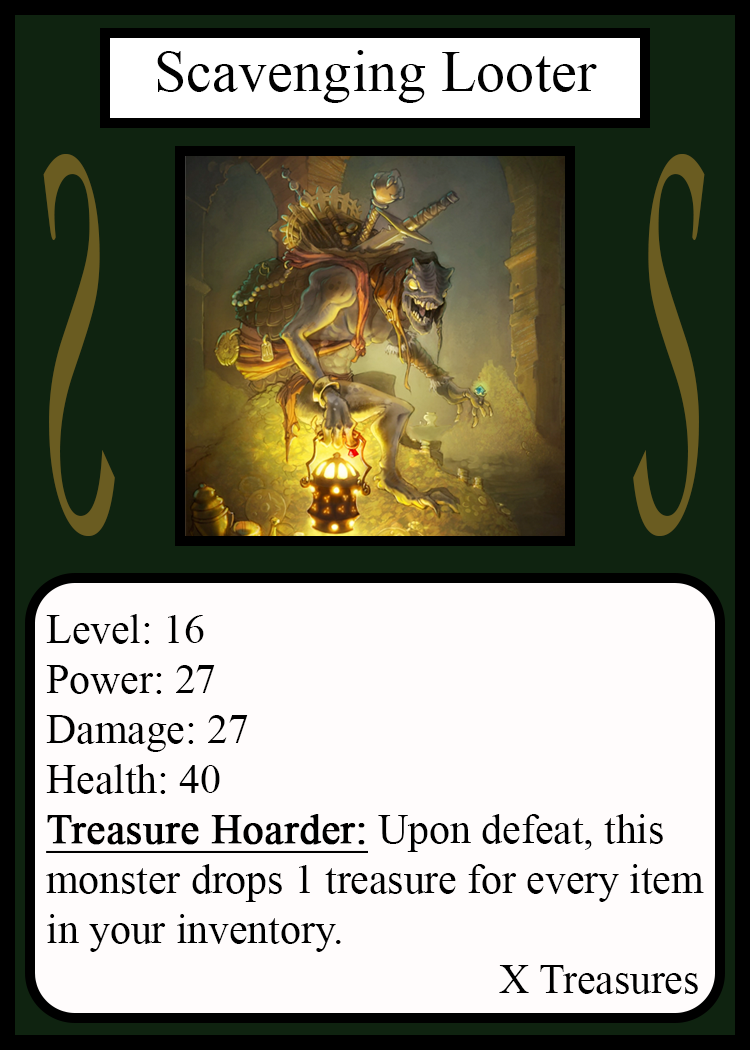
<style>
.page{position:relative;width:750px;height:1050px;background:#fffcfc}
.page>*{position:absolute;margin:0}
.t1{font:58.3px "TimesNewRomanPSMT";color:#010101}
.t2{font:548.5px "Apple-Chancery";color:#6a5c21;scale:0.27 1}
.t3{font:548.2px "Apple-Chancery";color:#6a5c21;scale:0.27 1}
.t4{font:41.7px "TimesNewRomanPSMT";color:#000000}
.t5{font:41.7px "TimesNewRomanPSMT";color:#000000;font-weight:bold;text-decoration:underline}
</style>
<div class="page">
<p class="t1" style="left:157px;top:50px;width:440px;height:53px">Scavenging Looter</p>
<p class="t2" style="left:43px;top:154px;width:72px;height:382px;rotate:180deg">S</p>
<p class="t3" style="left:633px;top:154px;width:72px;height:382px">S</p>
<p class="t4" style="left:46px;top:614px;width:658px;height:380px">Level: 16<br>Power: 27<br>Damage: 27<br>Health: 40<br><span class="t5">Treasure Hoarder:</span> Upon defeat, this<br>monster drops 1 treasure for every item<br>in your inventory.<br>                  X Treasures</p>
</div>
